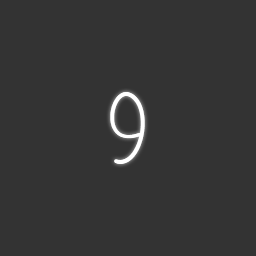
<style>
.page{position:relative;width:256px;height:256px;background:#333333}
.page>*{position:absolute;margin:0}
.t1{font:96px "BetterTogetherDemo";color:#ffffff}
</style>
<div class="page">
<p class="t1" style="left:110px;top:92px;width:35px;height:72px">9</p>
</div>
